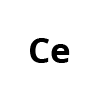
<style>
.page{position:relative;width:100px;height:100px;background:#ffffff}
.page>*{position:absolute;margin:0}
.t1{font:35px "OpenSans-Bold";color:#000000}
</style>
<div class="page">
<p class="t1" style="left:30px;top:38px;width:40px;height:25px">Ce</p>
</div>
